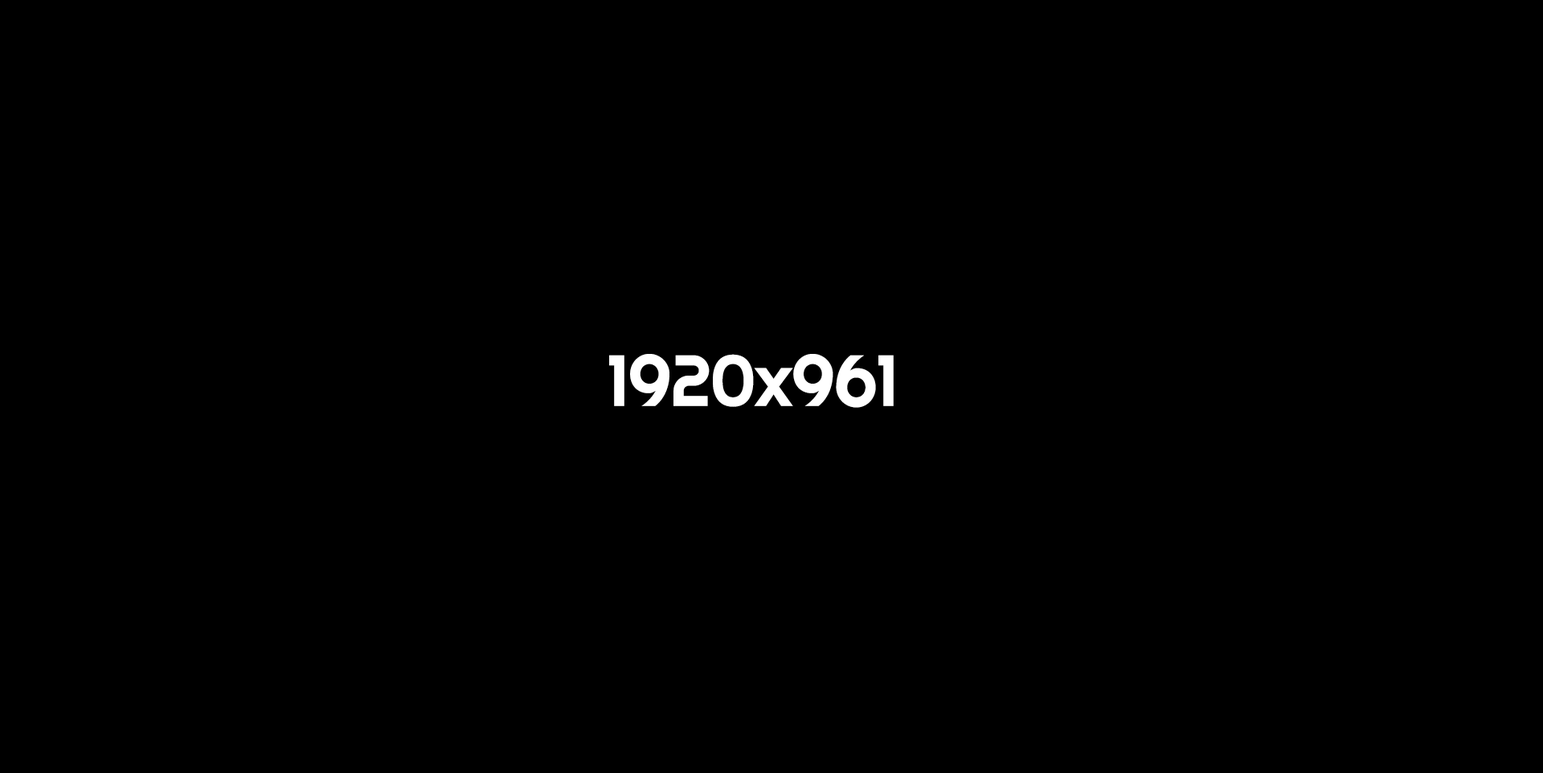
<style>
.page{position:relative;width:1543px;height:773px;background:#000000}
.page>*{position:absolute;margin:0}
.t1{font:72.4px "Righteous-Regular";letter-spacing:-0.025em;color:#ffffff}
</style>
<div class="page">
<p class="t1" style="left:609px;top:354px;width:285px;height:54px">1920x961</p>
</div>
